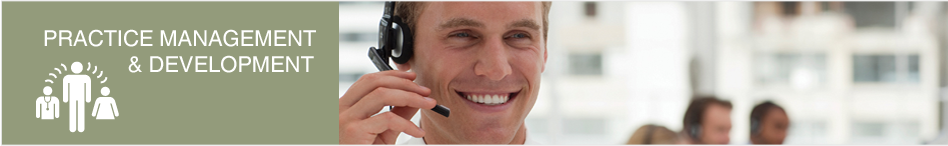
<style>
.page{position:relative;width:948px;height:146px;background:#939b7b}
.page>*{position:absolute;margin:0}
.t1{font:21.9px/26.7px "Helvetica";color:#ffffff;text-transform:uppercase}
</style>
<div class="page">
<p class="t1" style="left:44px;top:29px;width:272px;height:44px">Practice Management<br>              &amp; Development</p>
</div>
